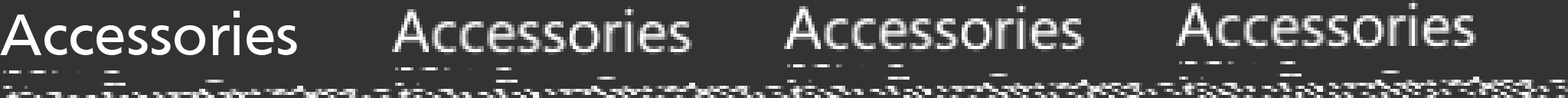
<style>
.page{position:relative;width:1568px;height:98px;background:#333333}
.page>*{position:absolute;margin:0}
.t1{font:61.2px "Frutiger";color:#ffffff}
</style>
<div class="page">
<p class="t1" style="left:0px;top:11px;width:297px;height:44px">Accessories</p>
</div>
